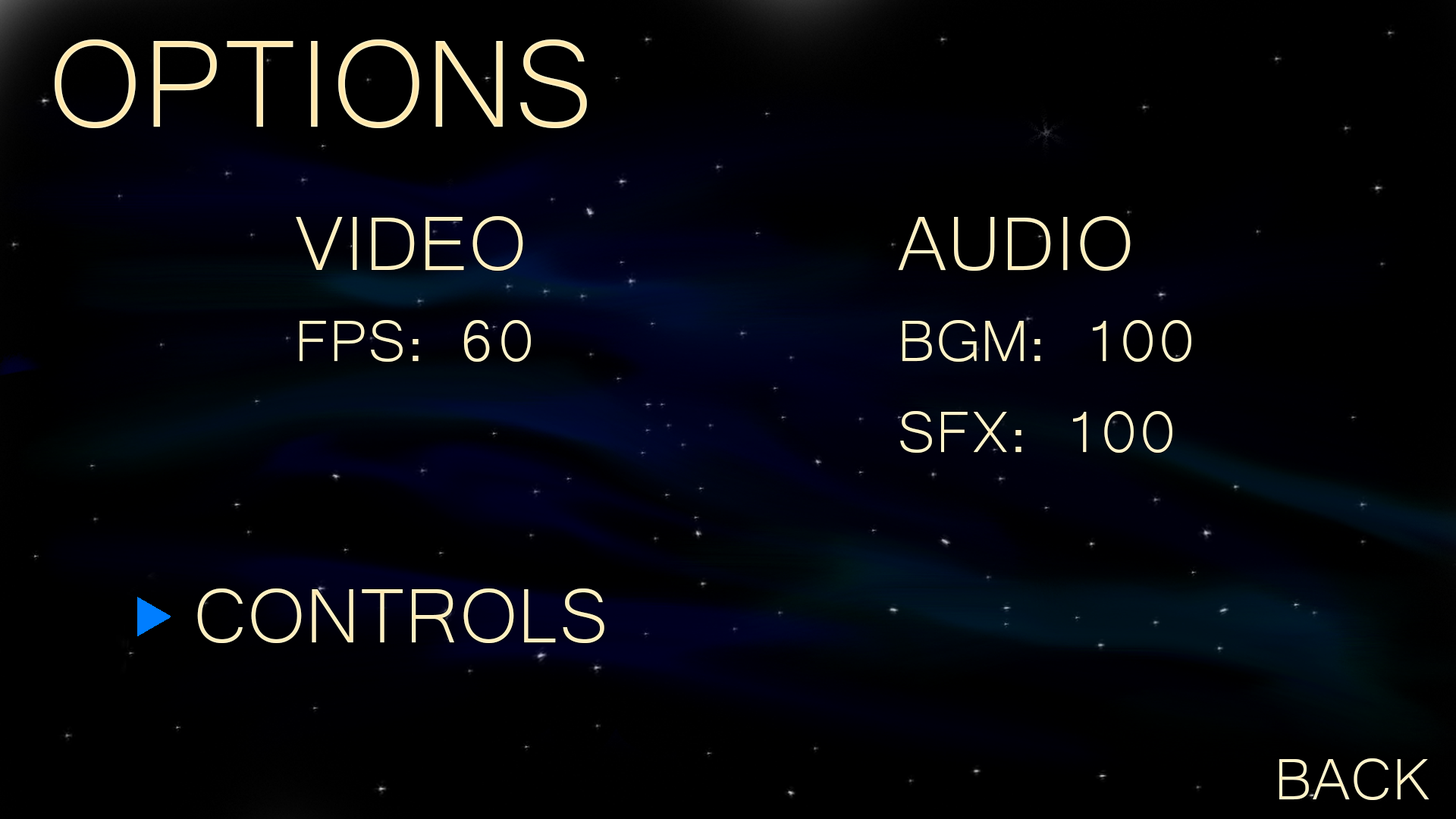
<style>
.page{position:relative;width:1456px;height:819px;background:#000000}
.page>*{position:absolute;margin:0}
.t1{font:159.9px "Microsoft-Yi-Baiti";color:#ffeab2}
.t2{font:75.8px "Microsoft-Yi-Baiti";color:#fff1c5}
.t3{font:98.6px "Microsoft-Yi-Baiti";color:#fff1c5}
.t4{font:75.8px "Microsoft-Yi-Baiti";color:#fff2c8}
.t5{font:98.6px "Microsoft-Yi-Baiti";color:#fff2c8}
.t6{font:98.6px "Microsoft-Yi-Baiti";color:#ffefbf}
.t7{font:75.8px "Microsoft-Yi-Baiti";color:#fff3c9}
</style>
<div class="page">
<p class="t1" style="left:55px;top:39px;width:532px;height:89px">OPTIONS</p>
<p class="t2" style="left:296px;top:216px;width:235px;height:146px"><span class="t3">VIDEO<br></span>FPS: 60</p>
<p class="t4" style="left:898px;top:216px;width:293px;height:237px"><span class="t5">AUDIO<br></span>BGM: 100<br>SFX: 100</p>
<p class="t6" style="left:197px;top:588px;width:407px;height:55px">CONTROLS</p>
<p class="t7" style="left:1279px;top:758px;width:150px;height:42px">BACK</p>
</div>
